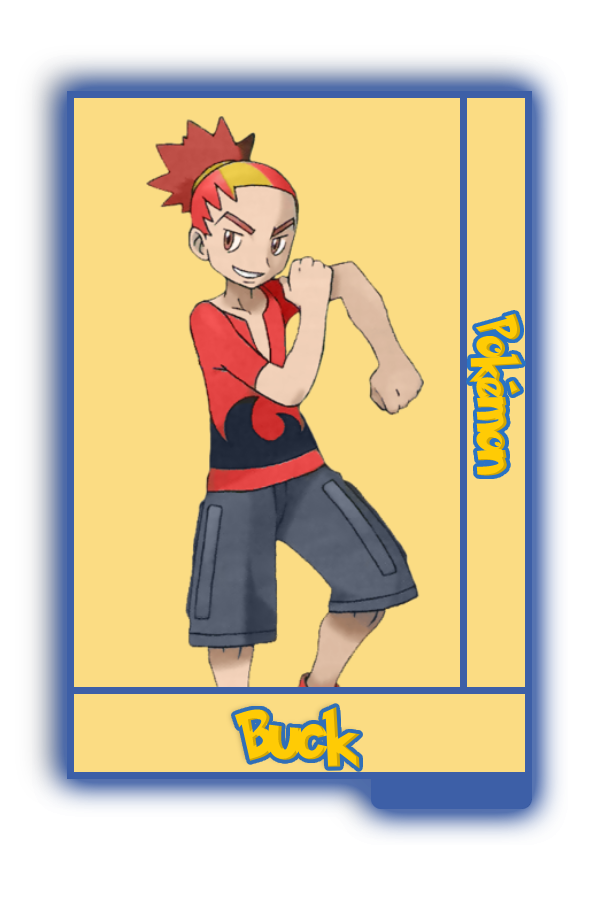
<style>
.page{position:relative;width:600px;height:900px;background:#fbdc83}
.page>*{position:absolute;margin:0}
.t1{font:48.8px "PokemonSolidNormal";color:#ffcb05;scale:0.8 1}
.t2{font:56.6px "PokemonSolidNormal";color:#ffcb05;scale:0.92 1}
</style>
<div class="page">
<p class="t1" style="left:469px;top:313px;width:54px;height:163px;rotate:90deg">Pokémon</p>
<p class="t2" style="left:234px;top:706px;width:126px;height:63px">Buck</p>
</div>
